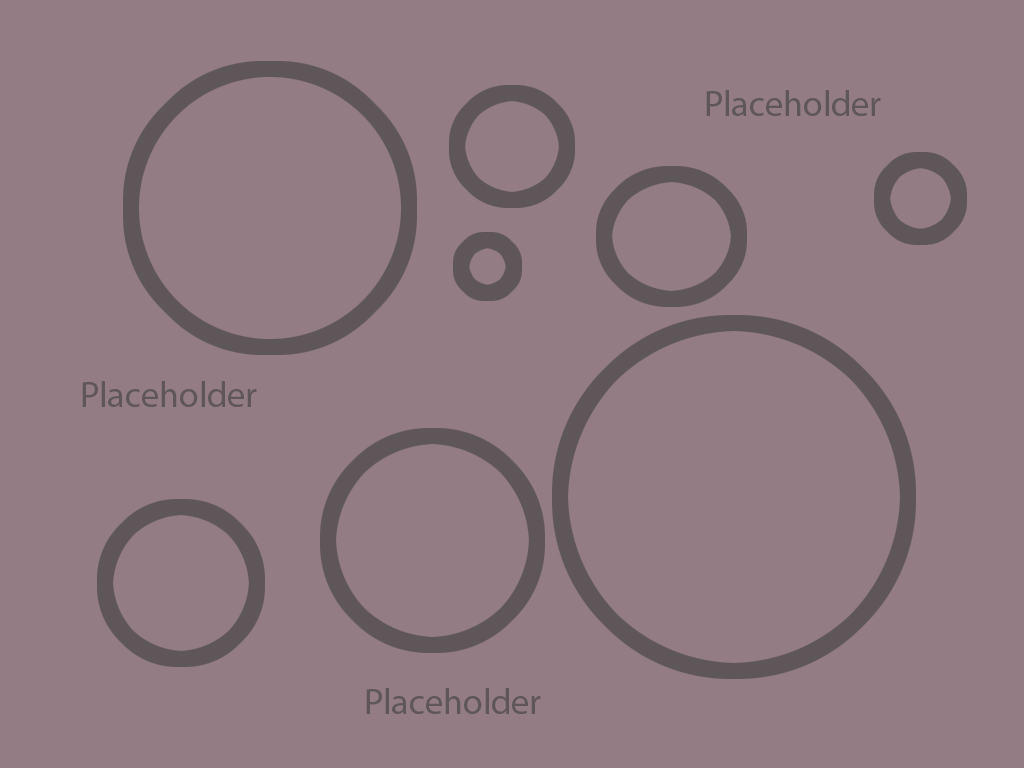
<style>
.page{position:relative;width:1024px;height:768px;background:#937c83}
.page>*{position:absolute;margin:0}
.t1{font:36px "MyriadPro-Regular";color:#5f5659}
</style>
<div class="page">
<p class="t1" style="left:82px;top:381px;width:175px;height:26px">Placeholder</p>
</div>
